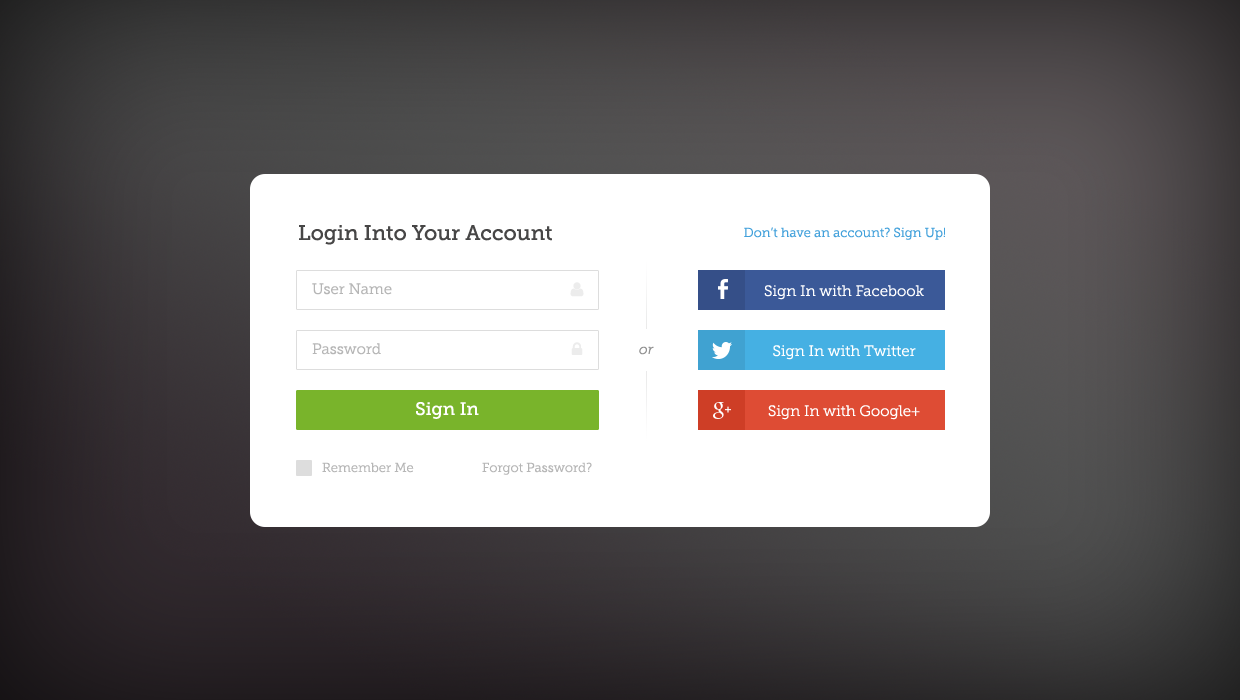
<style>
.page{position:relative;width:1240px;height:700px;background:#ffffff}
.page>*{position:absolute;margin:0}
.t1{font:21px "MuseoSlab-500";color:#474646}
.t2{font:13px "MuseoSlab-300";color:#43a1db}
.t3{font:15px "MuseoSlab-300";color:#b6b6b6}
.t4{font:15px "MuseoSlab-300";color:#ffffff}
.t5{font:14px "MuseoSlab-300Italic";color:#919191}
.t6{font:18px "MuseoSlab-500";color:#ffffff}
.t7{font:13px "MuseoSlab-300";color:#b6b6b6}
</style>
<div class="page">
<p class="t1" style="left:299px;top:225px;width:253px;height:20px">Login Into Your Account</p>
<p class="t2" style="left:744px;top:227px;width:201px;height:13px">Don’t have an account? Sign Up!</p>
<p class="t3" style="left:312px;top:283px;width:80px;height:12px">User Name</p>
<p class="t4" style="left:764px;top:285px;width:160px;height:15px">Sign In with Facebook</p>
<p class="t3" style="left:312px;top:343px;width:69px;height:12px">Password</p>
<p class="t5" style="left:639px;top:346px;width:15px;height:9px">or</p>
<p class="t4" style="left:773px;top:345px;width:143px;height:15px">Sign In with Twitter</p>
<p class="t6" style="left:416px;top:402px;width:63px;height:17px">Sign In</p>
<p class="t4" style="left:768px;top:405px;width:152px;height:15px">Sign In with Google+</p>
<p class="t7" style="left:322px;top:462px;width:92px;height:11px">Remember Me</p>
<p class="t7" style="left:482px;top:462px;width:110px;height:13px">Forgot Password?</p>
</div>
